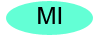
<style>
.page{position:relative;width:100px;height:35px;background:#63ffd5}
.page>*{position:absolute;margin:0}
.t1{font:24px "ArialMT";color:#000000}
</style>
<div class="page">
<p class="t1" style="left:38px;top:7px;width:24px;height:17px">MI</p>
</div>
